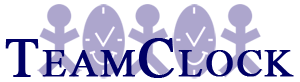
<style>
.page{position:relative;width:300px;height:82px;background:#ffffff}
.page>*{position:absolute;margin:0}
.t1{font:56px "TimesNewRomanPSMT";letter-spacing:0.04em;color:#000066;font-variant:small-caps;font-weight:bold}
</style>
<div class="page">
<p class="t1" style="left:5px;top:38px;width:289px;height:40px">TeamClock</p>
</div>
